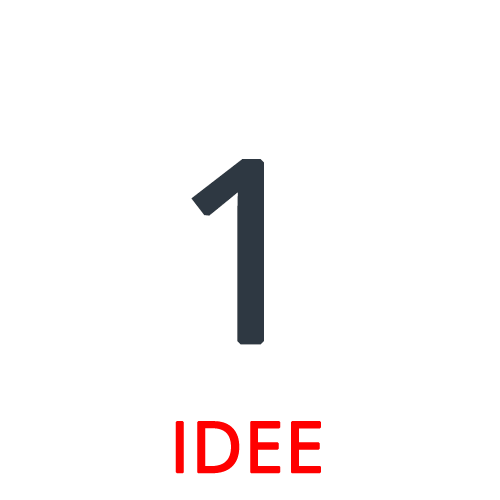
<style>
.page{position:relative;width:500px;height:500px;background:#ffffff}
.page>*{position:absolute;margin:0}
.t1{font:250px "OpenSans-Regular";color:#2e3842;font-weight:bold}
.t2{font:70px "OpenSans-Regular";color:#ff0000;font-weight:bold}
</style>
<div class="page">
<p class="t1" style="left:191px;top:159px;width:73px;height:186px">1</p>
<p class="t2" style="left:175px;top:421px;width:146px;height:53px">IDEE</p>
</div>
